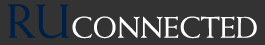
<style>
.page{position:relative;width:265px;height:45px;background:#333333}
.page>*{position:absolute;margin:0}
.t1{font:29.7px "Weiss";color:#ffffff}
.t2{font:47.4px "Weiss";color:#001f44}
</style>
<div class="page">
<p class="t1" style="left:7px;top:4px;width:250px;height:35px"><span class="t2">RU</span>CONNECTED</p>
</div>
